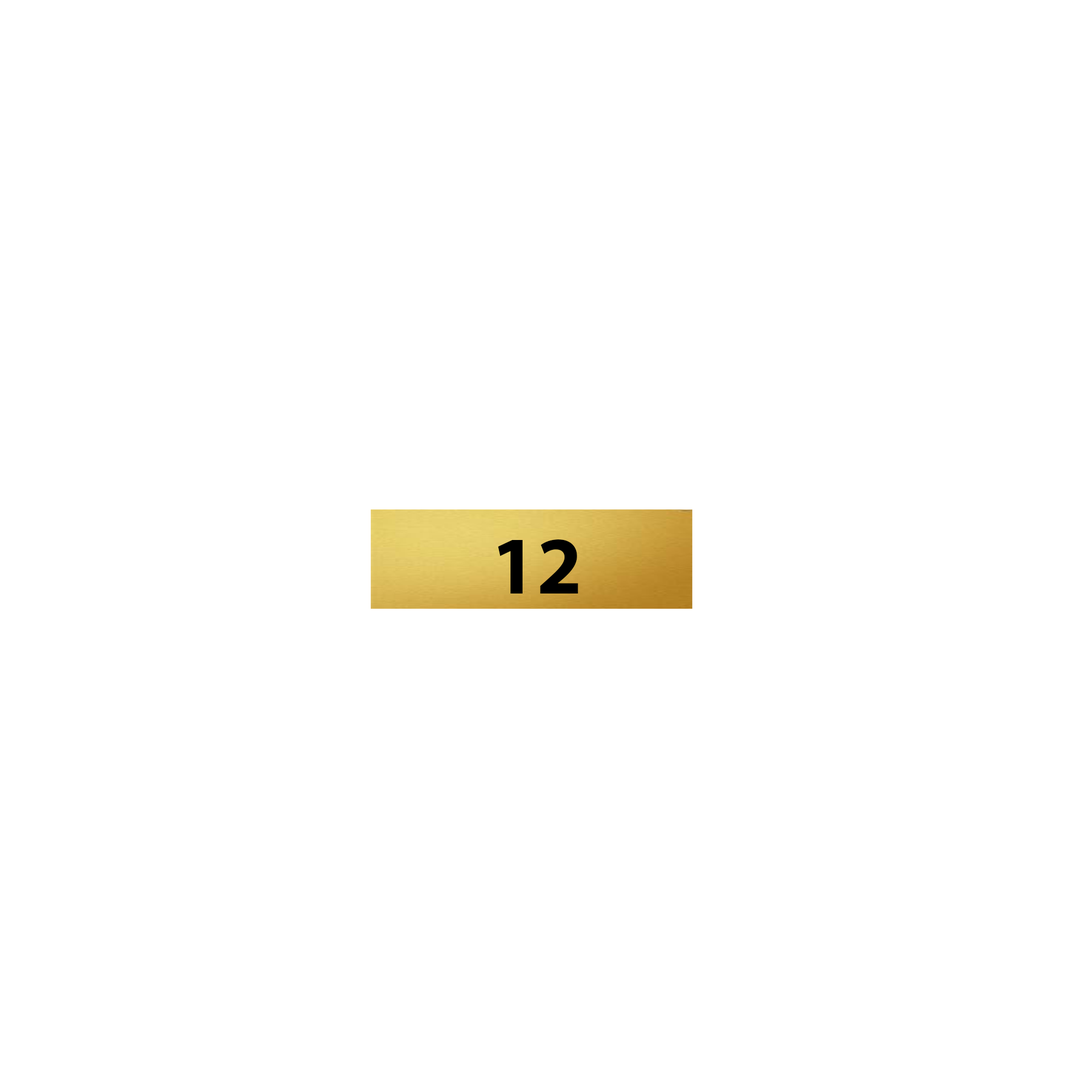
<style>
.page{position:relative;width:1092px;height:1092px;background:#ffffff}
.page>*{position:absolute;margin:0}
.t1{font:81.9px "MyriadPro-Bold";color:#000000}
</style>
<div class="page">
<p class="t1" style="left:498px;top:539px;width:80px;height:54px">12</p>
</div>
